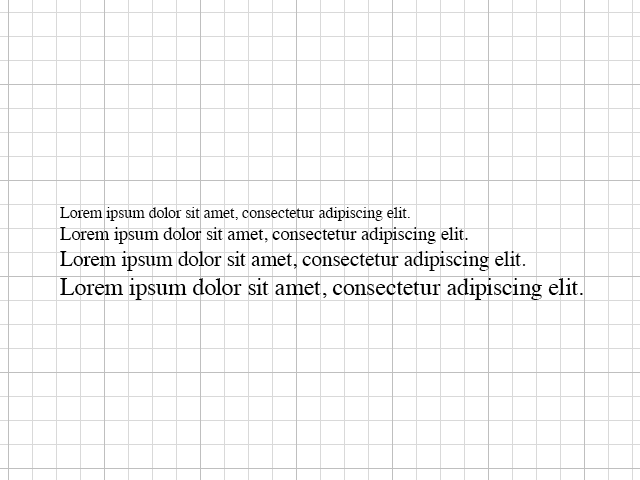
<style>
.page{position:relative;width:640px;height:480px;background:#ffffff}
.page>*{position:absolute;margin:0}
.t1{font:16px "Times-Roman";color:#000000}
.t2{font:18.7px "Times-Roman";color:#000000}
.t3{font:21.3px "Times-Roman";color:#000000}
.t4{font:24px "Times-Roman";color:#000000}
</style>
<div class="page">
<p class="t1" style="left:60px;top:207px;width:523px;height:93px">Lorem ipsum dolor sit amet, consectetur adipiscing elit.<br><span class="t2">Lorem ipsum dolor sit amet, consectetur adipiscing elit.<br></span><span class="t3">Lorem ipsum dolor sit amet, consectetur adipiscing elit.<br></span><span class="t4">Lorem ipsum dolor sit amet, consectetur adipiscing elit.</span></p>
</div>
